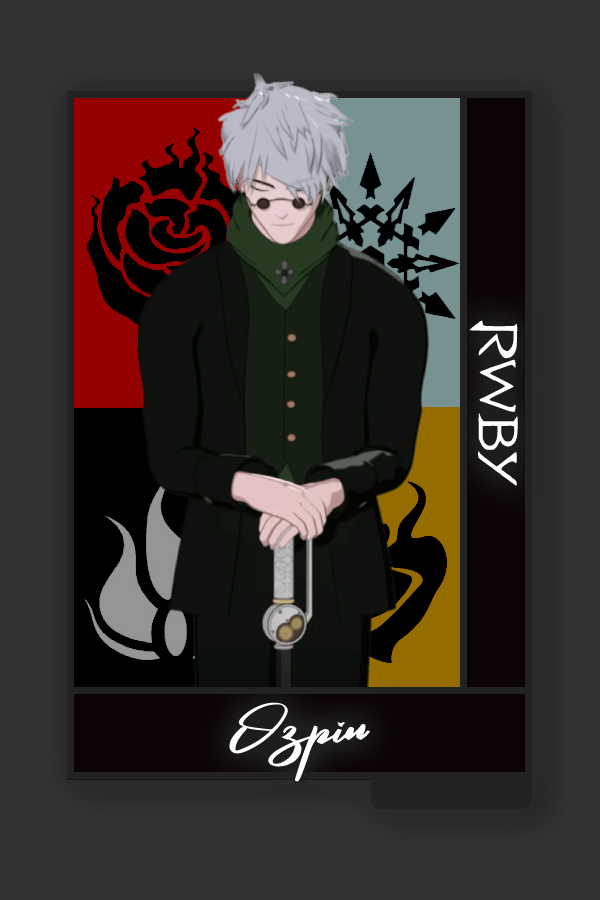
<style>
.page{position:relative;width:600px;height:900px;background:#333333}
.page>*{position:absolute;margin:0}
.t1{font:61.3px "RWBY_Style";color:#ffffff;scale:1.25 1}
.t2{font:75px "RosegaFREE";color:#ffffff}
</style>
<div class="page">
<p class="t1" style="left:469px;top:320px;width:49px;height:166px;rotate:90deg">RWBY</p>
<p class="t2" style="left:229px;top:702px;width:142px;height:80px">Ozpin</p>
</div>
